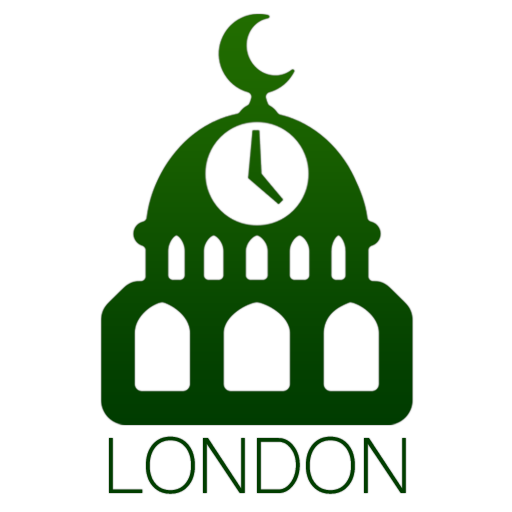
<style>
.page{position:relative;width:512px;height:512px;background:#ffffff}
.page>*{position:absolute;margin:0}
.t1{font:74.5px "ShreeDev0714";color:#013e00}
</style>
<div class="page">
<p class="t1" style="left:109px;top:436px;width:297px;height:58px">LONDON</p>
</div>
